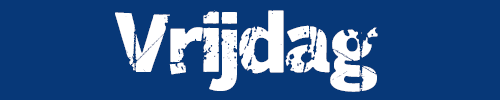
<style>
.page{position:relative;width:500px;height:100px;background:#073878}
.page>*{position:absolute;margin:0}
.t1{font:55px "321Perfect";color:#ffffff}
</style>
<div class="page">
<p class="t1" style="left:115px;top:10px;width:263px;height:82px">Vrijdag</p>
</div>
